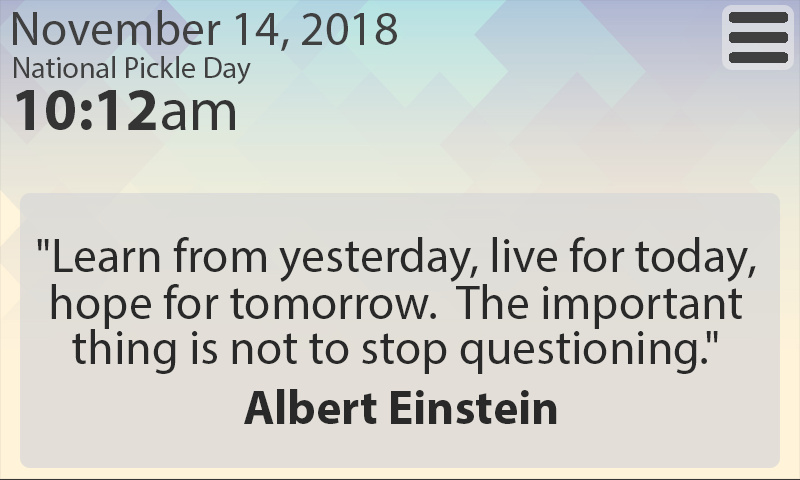
<style>
.page{position:relative;width:800px;height:480px;background:#e3dfd8}
.page>*{position:absolute;margin:0}
.t1{font:48px "MyriadPro-Regular";color:#404040}
.t2{font:30px "MyriadPro-Regular";color:#404040}
.t3{font:60px "MyriadPro-Bold";color:#343434}
.t4{font:60px "MyriadPro-Regular";color:#343434}
.t5{font:48px/45px "MyriadPro-Regular";color:#292929}
.t6{font:48px/47px "MyriadPro-Regular";color:#292929}
.t7{font:48px/30px "MyriadPro-Bold";color:#292929}
</style>
<div class="page">
<p class="t1" style="left:13px;top:10px;width:384px;height:41px">November 14, 2018</p>
<p class="t2" style="left:14px;top:56px;width:237px;height:29px">National Pickle Day</p>
<p class="t3" style="left:16px;top:90px;width:219px;height:40px">10:12<span class="t4">am</span></p>
<p class="t5" style="left:37px;top:237px;width:719px;height:187px;text-align:center">"Learn from yesterday, live for today, <br><span class="t6">hope for tomorrow.  The important <br></span>thing is not to stop questioning." <br><br><span class="t7">Albert Einstein</span></p>
</div>
